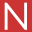
<style>
.page{position:relative;width:32px;height:32px;background:#cc3333}
.page>*{position:absolute;margin:0}
.t1{font:37.5px "Raleway";color:#ffffff}
</style>
<div class="page">
<p class="t1" style="left:4px;top:2px;width:23px;height:28px">N</p>
</div>
